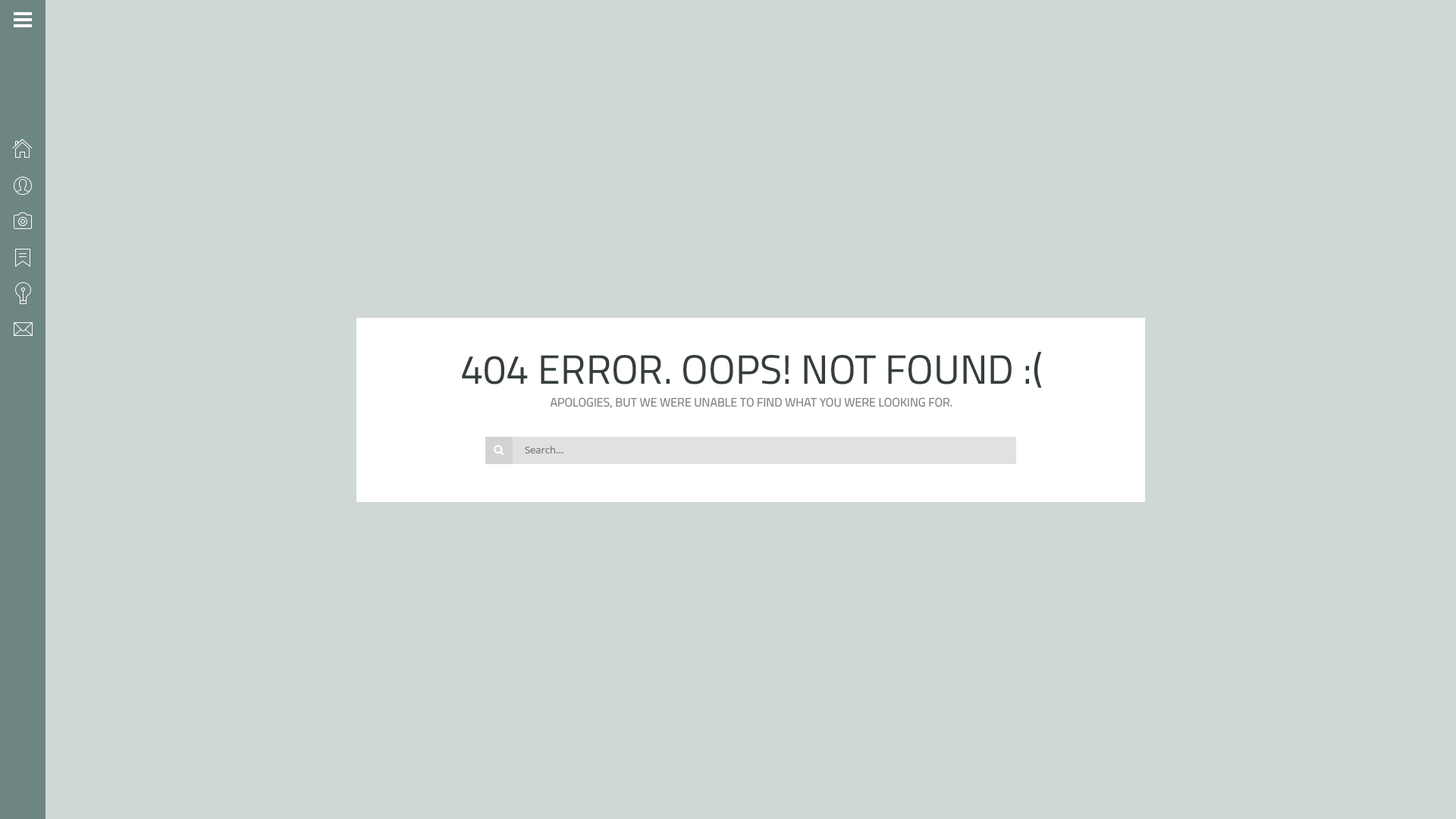
<style>
.page{position:relative;width:1456px;height:819px;background:#cfd7d7}
.page>*{position:absolute;margin:0}
.t1{font:40.9px "TitilliumWeb-Regular";color:#353e3d;text-transform:uppercase}
.t2{font:12.1px "TitilliumWeb-Regular";color:#808080;text-transform:uppercase}
.t3{font:9.9px "OpenSans";color:#777979}
</style>
<div class="page">
<p class="t1" style="left:462px;top:352px;width:580px;height:36px">404 error. oops! not found :(</p>
<p class="t2" style="left:550px;top:397px;width:402px;height:12px">Apologies, but we were unable to find what you were looking for.</p>
<p class="t3" style="left:525px;top:446px;width:38px;height:7px">Search...</p>
</div>
